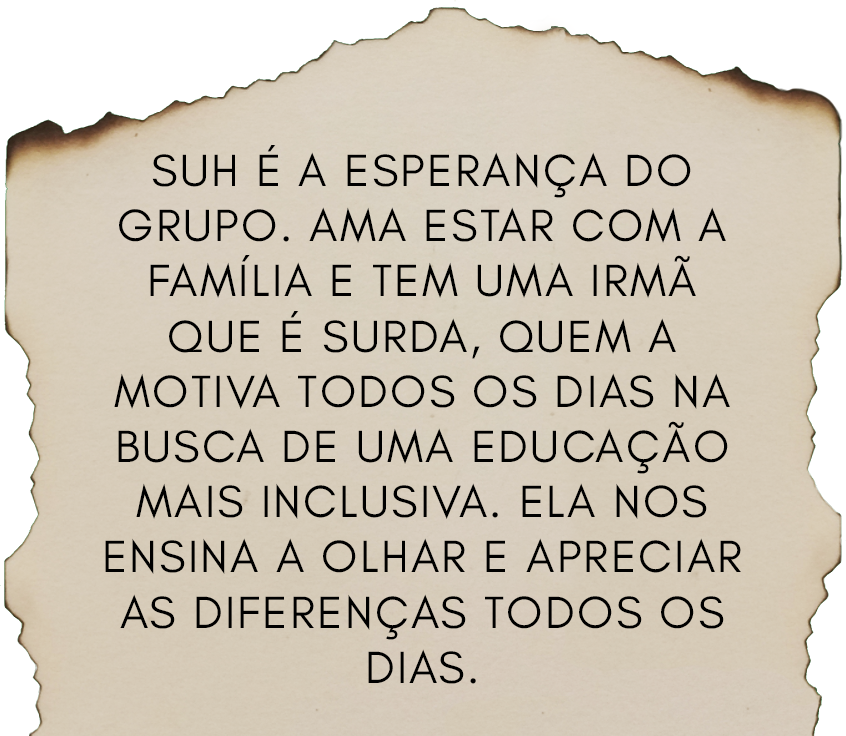
<style>
.page{position:relative;width:846px;height:736px}
.page>*{position:absolute;margin:0}
.t1{font:46px "GlacialIndifference-Regular";letter-spacing:0.05em;color:#000000;text-transform:uppercase}
</style>
<div class="page">
<p class="t1" style="left:105px;top:145px;width:636px;height:539px;text-align:center">suh é a esperança do<br>grupo. ama estar com a<br>família e tem uma irmã<br>que é surda, quem a<br>motiva todos os dias na<br>busca de uma educação<br>mais inclusiva. ela nos<br>ensina a olhar e apreciar<br>as diferenças todos os<br>dias.</p>
</div>
